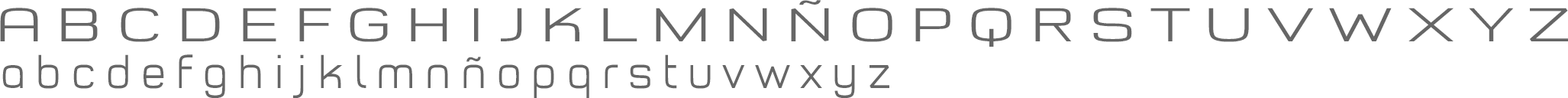
<style>
.page{position:relative;width:1568px;height:98px;background:#ffffff}
.page>*{position:absolute;margin:0}
.t1{font:45.8px "TypoStyleLightDemo";letter-spacing:0.2em;color:#666666;scale:1.5 1}
.t2{font:45.8px "TypoStyleLightDemo";letter-spacing:0.2em;color:#666666}
</style>
<div class="page">
<p class="t1" style="left:0px;top:0px;width:1569px;height:47px">ABCDEFGHIJKLMNÑOPQRSTUVWXYZ</p>
<p class="t2" style="left:2px;top:54px;width:887px;height:44px">abcdefghijklmnñopqrstuvwxyz</p>
</div>
